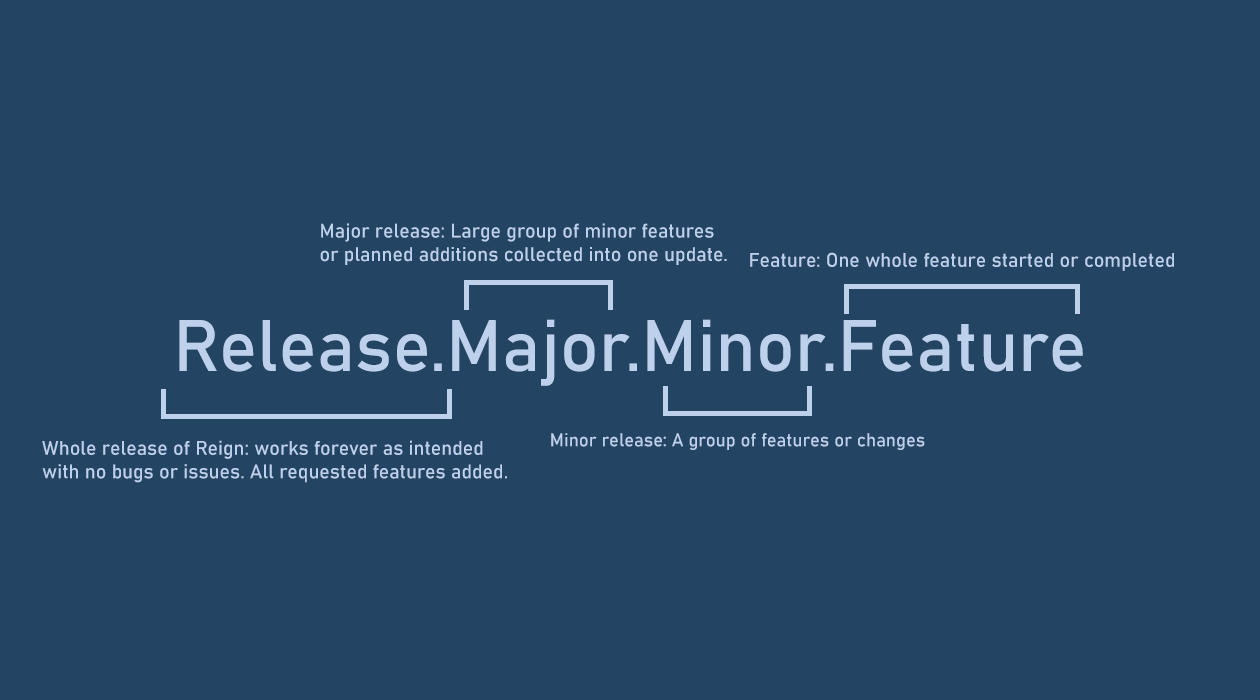
<style>
.page{position:relative;width:1260px;height:700px;background:#244464}
.page>*{position:absolute;margin:0}
.t1{font:19.6px "Bahnschrift";color:#bdd1ec}
.t2{font:72px "Bahnschrift";color:#bdd1ec}
.t3{font:18.3px "Bahnschrift";color:#bdd1ec}
</style>
<div class="page">
<p class="t1" style="left:320px;top:223px;width:407px;height:42px">Major release: Large group of minor features<br>or planned additions collected into one update.</p>
<p class="t1" style="left:750px;top:252px;width:424px;height:19px">Feature: One whole feature started or completed</p>
<p class="t2" style="left:179px;top:319px;width:904px;height:67px">Release.Major.Minor.Feature</p>
<p class="t3" style="left:551px;top:433px;width:374px;height:17px">Minor release: A group of features or changes</p>
<p class="t1" style="left:42px;top:440px;width:465px;height:43px">Whole release of Reign: works forever as intended<br>with no bugs or issues. All requested features added.</p>
</div>
